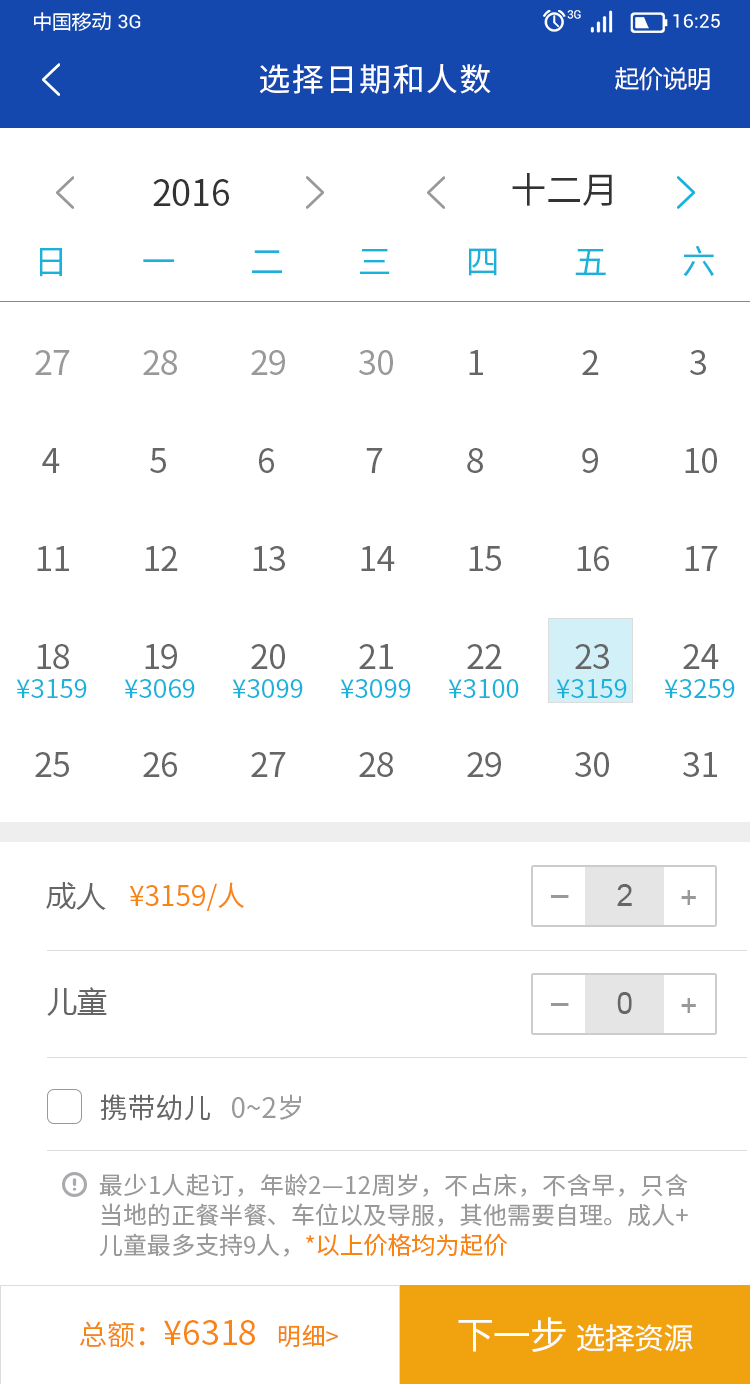
<style>
.page{position:relative;width:750px;height:1384px;background:#ffffff}
.page>*{position:absolute;margin:0}
.t1{font:32px "SourceHanSansCN-Regular";letter-spacing:0.05em;color:#ffffff}
.t2{font:24px "MicrosoftYaHei";color:#ffffff}
.t3{font:36px "SourceHanSansCN-Regular";color:#333333}
.t4{font:34px "SourceHanSansCN-Regular";color:#1ab2db}
.t5{font:34px "SourceHanSansCN-Regular";color:#999999}
.t6{font:34px "SourceHanSansCN-Regular";color:#666666}
.t7{font:26px "SourceHanSansCN-Regular";color:#1ab2db}
.t8{font:30px "MicrosoftYaHei";color:#666666}
.t9{font:28px "SourceHanSansCN-Regular";color:#f88412}
.t10{font:30px "ArialMT";color:#666666}
.t11{font:30px "ArialMT";color:#999999}
.t12{font:28px "SourceHanSansCN-Regular";color:#666666}
.t13{font:28px "SourceHanSansCN-Regular";color:#999999}
.t14{font:24px/30px "SourceHanSansCN-Regular";color:#999999}
.t15{font:24px/30px "SourceHanSansCN-Regular";color:#f88412}
.t16{font:34px "SourceHanSansCN-Regular";color:#f88412}
.t17{font:24px "SourceHanSansCN-Regular";color:#f88412}
.t18{font:30px "SourceHanSansCN-Regular";letter-spacing:-0.025em;color:#fffefe}
.t19{font:38px "SourceHanSansCN-Regular";letter-spacing:-0.025em;color:#fffefe}
</style>
<div class="page">
<p class="t1" style="left:260px;top:64px;width:231px;height:30px">选择日期和人数</p>
<p class="t2" style="left:615px;top:67px;width:95px;height:24px">起价说明</p>
<p class="t3" style="left:512px;top:173px;width:100px;height:33px">十二月</p>
<p class="t3" style="left:153px;top:179px;width:76px;height:27px">2016</p>
<p class="t4" style="left:40px;top:245px;width:674px;height:32px">日   一   二   三   四   五   六</p>
<p class="t5" style="left:35px;top:350px;width:671px;height:25px">27  28  29  30  <span class="t6">1    2    3</span></p>
<p class="t6" style="left:42px;top:448px;width:675px;height:25px"><span class="t5"> </span>4    5    6    7   8    9   10</p>
<p class="t6" style="left:37px;top:546px;width:681px;height:25px">11  12  13  14  15  16  17</p>
<p class="t6" style="left:37px;top:644px;width:682px;height:25px">18  19  20  21  22  23  24</p>
<p class="t7" style="left:16px;top:679px;width:719px;height:19px">¥3159 ¥3069 ¥3099 ¥3099 ¥3100 ¥3159 ¥3259</p>
<p class="t6" style="left:35px;top:752px;width:682px;height:25px">25  26  27  28  29  30  31</p>
<p class="t8" style="left:46px;top:882px;width:60px;height:28px">成人</p>
<p class="t9" style="left:129px;top:882px;width:115px;height:29px">¥3159/人</p>
<p class="t10" style="left:617px;top:884px;width:15px;height:22px">2</p>
<p class="t11" style="left:681px;top:890px;width:15px;height:15px">+</p>
<p class="t11" style="left:551px;top:895px;width:18px;height:3px">_</p>
<p class="t8" style="left:47px;top:987px;width:60px;height:29px">儿童</p>
<p class="t10" style="left:617px;top:992px;width:15px;height:22px">0</p>
<p class="t11" style="left:681px;top:998px;width:15px;height:15px">+</p>
<p class="t11" style="left:551px;top:1003px;width:18px;height:3px">_</p>
<p class="t12" style="left:100px;top:1094px;width:201px;height:27px">携带幼儿   <span class="t13">0~2岁</span></p>
<p class="t14" style="left:99px;top:1173px;width:589px;height:84px;text-align:justify">最少1人起订，年龄2—12周岁，不占床，不含早，只含当地的正餐半餐、车位以及导服，其他需要自理。成人+儿童最多支持9人，<span class="t15">*以上价格均为起价</span></p>
<p class="t16" style="left:80px;top:1320px;width:258px;height:28px"><span class="t9">总额：</span>¥6318   <span class="t17">明细&gt;</span></p>
<p class="t18" style="left:458px;top:1317px;width:235px;height:35px"><span class="t19">下一步 </span>选择资源</p>
</div>
